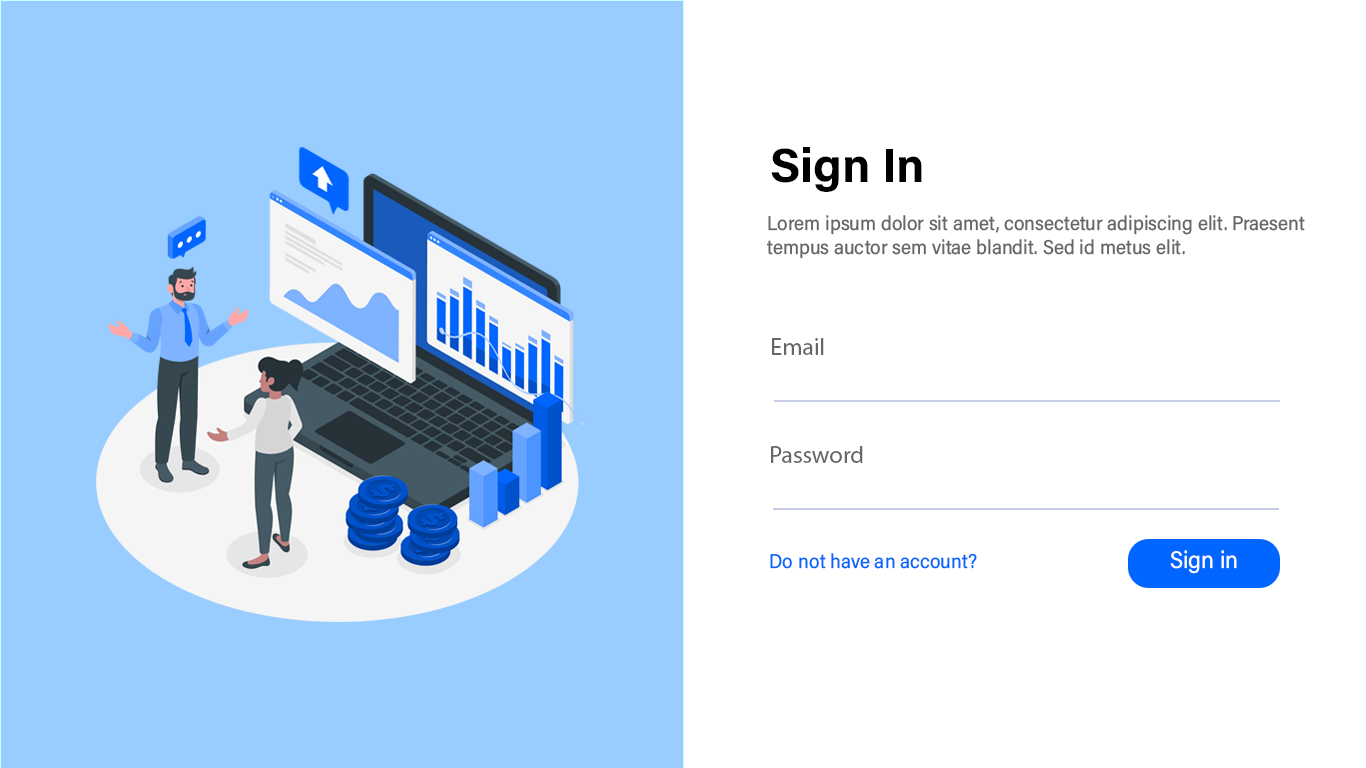
<style>
.page{position:relative;width:1366px;height:768px;background:#ffffff}
.page>*{position:absolute;margin:0}
.t1{font:48px "AcuminConcept-Bold";color:#000000}
.t2{font:20px "AcuminConcept-SemiCondensed";color:#666666}
.t3{font:24px "MyriadPro-Regular";color:#666666}
.t4{font:20px "AcuminConcept-SemiCondensed";color:#0066ff}
.t5{font:24px "AcuminConcept-SemiCondensed";color:#ffffff}
</style>
<div class="page">
<p class="t1" style="left:771px;top:147px;width:151px;height:45px">Sign In</p>
<p class="t2" style="left:767px;top:215px;width:538px;height:44px">Lorem ipsum dolor sit amet, consectetur adipiscing elit. Praesent <br>tempus auctor sem vitae blandit. Sed id metus elit.</p>
<p class="t3" style="left:772px;top:338px;width:52px;height:17px">Email</p>
<p class="t3" style="left:771px;top:446px;width:92px;height:17px">Password</p>
<p class="t4" style="left:770px;top:553px;width:207px;height:16px">Do not have an account?</p>
<p class="t5" style="left:1170px;top:550px;width:67px;height:24px">Sign in</p>
</div>
